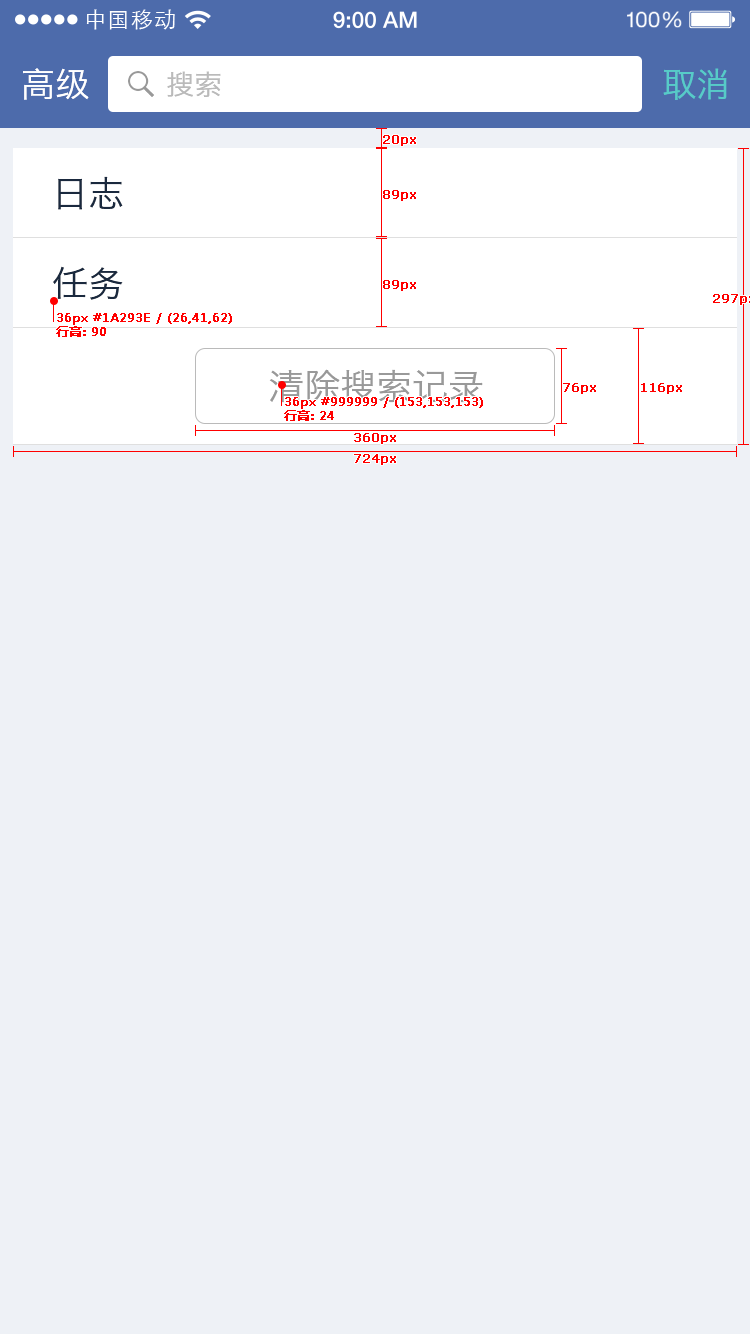
<style>
.page{position:relative;width:750px;height:1334px;background:#eef1f6}
.page>*{position:absolute;margin:0}
.t1{font:21.9px "STXihei";letter-spacing:0.04em;color:#ffffff}
.t2{font:34px "HiraginoSansGB-W3";color:#ffffff}
.t3{font:28px "HiraginoSansGB-W3";color:#bababa}
.t4{font:34px "HiraginoSansGB-W3";color:#57cbc8}
.t5{font:12px "Verdana";color:#ff0000;font-weight:bold}
.t6{font:36px/90px "HiraginoSansGB-W3";color:#1a293e}
.t7{font:12px "MicrosoftYaHei";color:#ff0000;font-weight:bold}
.t8{font:36px "HiraginoSansGB-W3";color:#999999}
</style>
<div class="page">
<p class="t1" style="left:86px;top:9px;width:89px;height:21px">中国移动</p>
<p class="t2" style="left:23px;top:68px;width:66px;height:32px">高级</p>
<p class="t3" style="left:167px;top:71px;width:54px;height:26px">搜索</p>
<p class="t4" style="left:663px;top:68px;width:64px;height:32px">取消</p>
<p class="t5" style="left:383px;top:135px;width:33px;height:11px">20px</p>
<p class="t6" style="left:53px;top:176px;width:70px;height:124px;text-align:center">日志<br>任务</p>
<p class="t5" style="left:383px;top:190px;width:33px;height:11px">89px</p>
<p class="t5" style="left:383px;top:280px;width:33px;height:11px">89px</p>
<p class="t7" style="left:56px;top:313px;width:176px;height:24px">36px #1A293E / (26,41,62)<br>行高: 90</p>
<p class="t8" style="left:269px;top:369px;width:214px;height:34px">清除搜索记录</p>
<p class="t5" style="left:563px;top:383px;width:33px;height:11px">76px</p>
<p class="t5" style="left:641px;top:383px;width:41px;height:11px">116px</p>
<p class="t7" style="left:284px;top:397px;width:199px;height:24px">36px #999999 / (153,153,153)<br>行高: 24</p>
<p class="t5" style="left:354px;top:433px;width:42px;height:11px">360px</p>
<p class="t5" style="left:354px;top:454px;width:42px;height:11px">724px</p>
</div>
